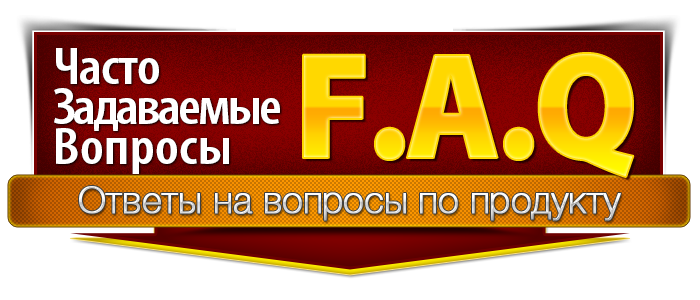
<style>
.page{position:relative;width:700px;height:300px;background:#ffffff}
.page>*{position:absolute;margin:0}
.t1{font:52.9px/40px "MyriadPro-SemiboldCond";letter-spacing:-0.05em;color:#ffffff;scale:1.1 1}
.t2{font:52.9px/40px "MyriadPro-SemiboldCond";letter-spacing:-0.02em;color:#ffffff;scale:1.1 1}
.t3{font:52.9px/40px "MyriadPro-SemiboldCond";letter-spacing:0.01em;color:#ffffff;scale:1.1 1}
.t4{font:152.9px "MyriadPro-Black";letter-spacing:-0.025em;color:#ffd800;scale:0.93 1}
.t5{font:37.1px "Helvetica-3-Thin";letter-spacing:-0.005em;font-weight:bold}
</style>
<div class="page">
<p class="t1" style="left:54px;top:48px;width:226px;height:126px"><span class="t2">Часто<br></span>Задаваемые<br><span class="t3">Вопросы</span></p>
<p class="t4" style="left:303px;top:53px;width:331px;height:124px">F.A.Q</p>
<p class="t5" style="left:79px;top:186px;width:542px;height:35px">Ответы на вопросы по продукту</p>
</div>
